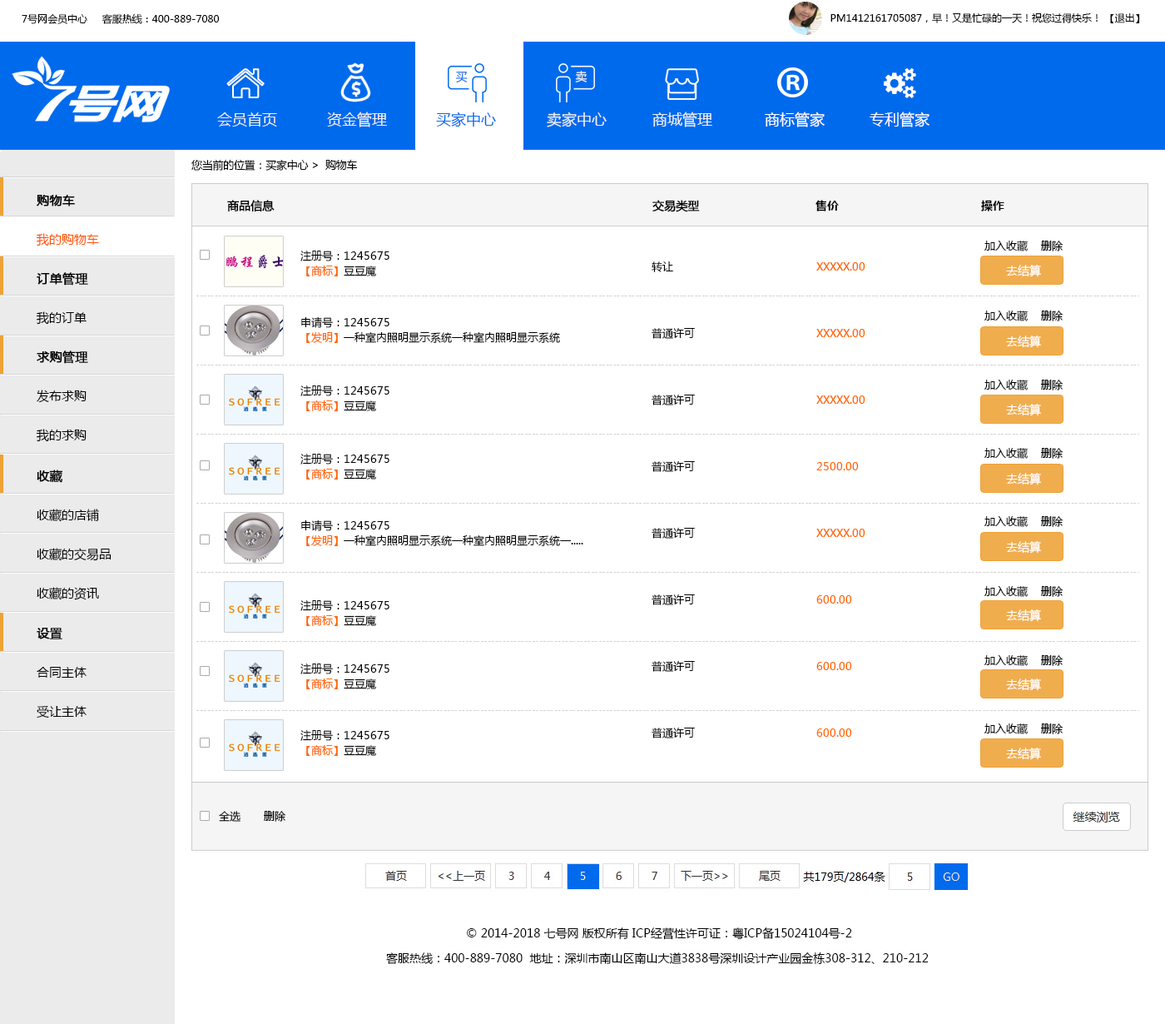
<style>
.page{position:relative;width:1165px;height:1024px;background:#ffffff}
.page>*{position:absolute;margin:0}
.t1{font:10px "MicrosoftYaHei";color:#000000}
.t2{font:11.7px "MicrosoftYaHei";color:#006aed}
.t3{font:11.7px "MicrosoftYaHei";color:#ecf0f1}
.t4{font:15px "MicrosoftYaHei";color:#ecf0f1}
.t5{font:15px "MicrosoftYaHei";color:#006aed}
.t6{font:15px "MicrosoftYaHei";color:#ffffff}
.t7{font:10.8px "MicrosoftYaHei";letter-spacing:-0.02em;color:#000000}
.t8{font:12.5px/39.1px "MicrosoftYaHei";color:#ff5400}
.t9{font:12.5px/39.1px "MicrosoftYaHei";color:#000000;font-weight:bold}
.t10{font:11.7px "MicrosoftYaHei";color:#000000;font-weight:bold}
.t11{font:11.7px "MicrosoftYaHei-Bold";color:#000000}
.t12{font:10.8px "MicrosoftYaHei";color:#000000}
.t13{font:10.8px/15px "MicrosoftYaHei";color:#000000}
.t14{font:10.8px/15px "MicrosoftYaHei";color:#ff6600}
.t15{font:10.8px/66.6px "MicrosoftYaHei";color:#000000}
.t16{font:10.8px/66.6px "MicrosoftYaHei";color:#ff6600}
.t17{font:11.7px "MicrosoftYaHei";color:#ffffff}
.t18{font:12.5px/39.1px "MicrosoftYaHei";color:#000000}
.t19{font:11.7px/25px "MicrosoftYaHei";color:#000000}
</style>
<div class="page">
<p class="t1" style="left:22px;top:13px;width:198px;height:11px">7号网会员中心     客服热线：400-889-7080</p>
<p class="t1" style="left:830px;top:13px;width:310px;height:10px">PM1412161705087，早！又是忙碌的一天！祝您过得快乐！ 【退出】</p>
<p class="t2" style="left:455px;top:72px;width:13px;height:11px">买</p>
<p class="t3" style="left:575px;top:71px;width:12px;height:11px">卖</p>
<p class="t4" style="left:217px;top:112px;width:60px;height:14px">会员首页</p>
<p class="t4" style="left:327px;top:112px;width:60px;height:15px">资金管理</p>
<p class="t5" style="left:436px;top:112px;width:60px;height:15px">买家中心</p>
<p class="t4" style="left:547px;top:112px;width:60px;height:15px">卖家中心</p>
<p class="t4" style="left:652px;top:112px;width:60px;height:15px">商城管理</p>
<p class="t6" style="left:765px;top:112px;width:60px;height:15px">商标管家</p>
<p class="t6" style="left:870px;top:112px;width:60px;height:15px">专利管家</p>
<p class="t7" style="left:191px;top:159px;width:167px;height:12px">您当前的位置：买家中心 &gt;  购物车</p>
<p class="t8" style="left:36px;top:195px;width:63px;height:51px"><span class="t9">购物车<br></span>我的购物车</p>
<p class="t10" style="left:227px;top:200px;width:48px;height:12px">商品信息</p>
<p class="t10" style="left:652px;top:200px;width:48px;height:12px">交易类型</p>
<p class="t11" style="left:816px;top:200px;width:23px;height:11px">售价</p>
<p class="t11" style="left:981px;top:200px;width:23px;height:11px">操作</p>
<p class="t12" style="left:984px;top:240px;width:79px;height:11px">加入收藏    删除</p>
<p class="t13" style="left:300px;top:250px;width:89px;height:26px">注册号：1245675<br><span class="t14">【商标】</span>豆豆魔</p>
<p class="t15" style="left:652px;top:261px;width:43px;height:477px">转让<br>普通许可<br>普通许可<br>普通许可<br>普通许可<br>普通许可<br>普通许可<br>普通许可</p>
<p class="t16" style="left:816px;top:262px;width:49px;height:474px">XXXXX.00<br>XXXXX.00<br>XXXXX.00<br>2500.00<br>XXXXX.00<br>600.00<br>600.00<br>600.00</p>
<p class="t17" style="left:1006px;top:265px;width:35px;height:12px">去结算</p>
<p class="t9" style="left:36px;top:272px;width:52px;height:53px">订单管理<br><span class="t18">我的订单</span></p>
<p class="t13" style="left:301px;top:316px;width:259px;height:27px">申请号：1245675<br><span class="t14">【发明】</span>一种室内照明显示系统一种室内照明显示系统</p>
<p class="t12" style="left:984px;top:310px;width:79px;height:11px">加入收藏    删除</p>
<p class="t17" style="left:1006px;top:335px;width:35px;height:13px">去结算</p>
<p class="t18" style="left:36px;top:350px;width:52px;height:92px"><span class="t9">求购管理<br></span>发布求购<br>我的求购</p>
<p class="t13" style="left:300px;top:385px;width:89px;height:26px">注册号：1245675<br><span class="t14">【商标】</span>豆豆魔</p>
<p class="t12" style="left:984px;top:379px;width:79px;height:11px">加入收藏    删除</p>
<p class="t17" style="left:1006px;top:404px;width:35px;height:12px">去结算</p>
<p class="t12" style="left:984px;top:448px;width:79px;height:11px">加入收藏    删除</p>
<p class="t13" style="left:300px;top:454px;width:89px;height:25px">注册号：1245675<br><span class="t14">【商标】</span>豆豆魔</p>
<p class="t18" style="left:37px;top:469px;width:75px;height:131px"><span class="t9">收藏<br></span>收藏的店铺<br>收藏的交易品<br>收藏的资讯</p>
<p class="t17" style="left:1006px;top:473px;width:35px;height:12px">去结算</p>
<p class="t13" style="left:301px;top:519px;width:282px;height:27px">申请号：1245675<br><span class="t14">【发明】</span>一种室内照明显示系统一种室内照明显示系统一.....</p>
<p class="t12" style="left:984px;top:516px;width:79px;height:11px">加入收藏    删除</p>
<p class="t17" style="left:1006px;top:541px;width:35px;height:12px">去结算</p>
<p class="t12" style="left:984px;top:586px;width:79px;height:11px">加入收藏    删除</p>
<p class="t13" style="left:300px;top:600px;width:89px;height:26px">注册号：1245675<br><span class="t14">【商标】</span>豆豆魔</p>
<p class="t17" style="left:1006px;top:609px;width:35px;height:13px">去结算</p>
<p class="t18" style="left:37px;top:627px;width:50px;height:91px"><span class="t9">设置<br></span>合同主体<br>受让主体</p>
<p class="t13" style="left:300px;top:663px;width:89px;height:26px">注册号：1245675<br><span class="t14">【商标】</span>豆豆魔</p>
<p class="t12" style="left:984px;top:655px;width:79px;height:11px">加入收藏    删除</p>
<p class="t17" style="left:1006px;top:678px;width:35px;height:13px">去结算</p>
<p class="t12" style="left:984px;top:723px;width:79px;height:11px">加入收藏    删除</p>
<p class="t13" style="left:300px;top:730px;width:89px;height:26px">注册号：1245675<br><span class="t14">【商标】</span>豆豆魔</p>
<p class="t17" style="left:1006px;top:747px;width:35px;height:13px">去结算</p>
<p class="t12" style="left:219px;top:811px;width:66px;height:10px">全选       删除</p>
<p class="t19" style="left:386px;top:927px;width:543px;height:37px;text-align:center">© 2014-2018 七号网 版权所有 ICP经营性许可证：粤ICP备15024104号-2<br>客服热线：400-889-7080  地址：深圳市南山区南山大道3838号深圳设计产业园金栋308-312、210-212</p>
</div>
